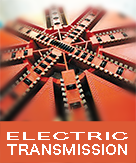
<style>
.page{position:relative;width:136px;height:163px;background:#dd5934}
.page>*{position:absolute;margin:0}
.t1{font:9.6px "HiraginoSansGB-W6";letter-spacing:0.025em;color:#ffffff;scale:2.31 1}
.t2{font:14px "HiraginoSansGB-W6";letter-spacing:0.025em;color:#ffffff}
</style>
<div class="page">
<p class="t1" style="left:7px;top:132px;width:121px;height:8px">ELECTRIC</p>
<p class="t2" style="left:7px;top:144px;width:120px;height:11px">TRANSMISSION</p>
</div>
